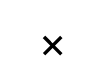
<style>
.page{position:relative;width:105px;height:83px;background:#ffffff}
.page>*{position:absolute;margin:0}
.t1{font:47.9px "DroidSans";color:#000000}
</style>
<div class="page">
<p class="t1" style="left:42px;top:35px;width:21px;height:21px">×</p>
</div>
